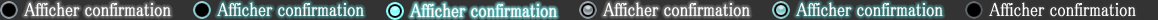
<style>
.page{position:relative;width:1158px;height:20px;background:#333333}
.page>*{position:absolute;margin:0}
.t1{font:19px "MS-PMincho";color:#ffffff;font-weight:bold;scale:0.84 1}
</style>
<div class="page">
<p class="t1" style="left:24px;top:2px;width:147px;height:15px">Afficher confirmation</p>
<p class="t1" style="left:217px;top:2px;width:147px;height:15px">Afficher confirmation</p>
<p class="t1" style="left:410px;top:3px;width:147px;height:15px">Afficher confirmation</p>
<p class="t1" style="left:603px;top:2px;width:147px;height:15px">Afficher confirmation</p>
<p class="t1" style="left:796px;top:2px;width:147px;height:15px">Afficher confirmation</p>
<p class="t1" style="left:989px;top:2px;width:147px;height:15px">Afficher confirmation</p>
</div>
